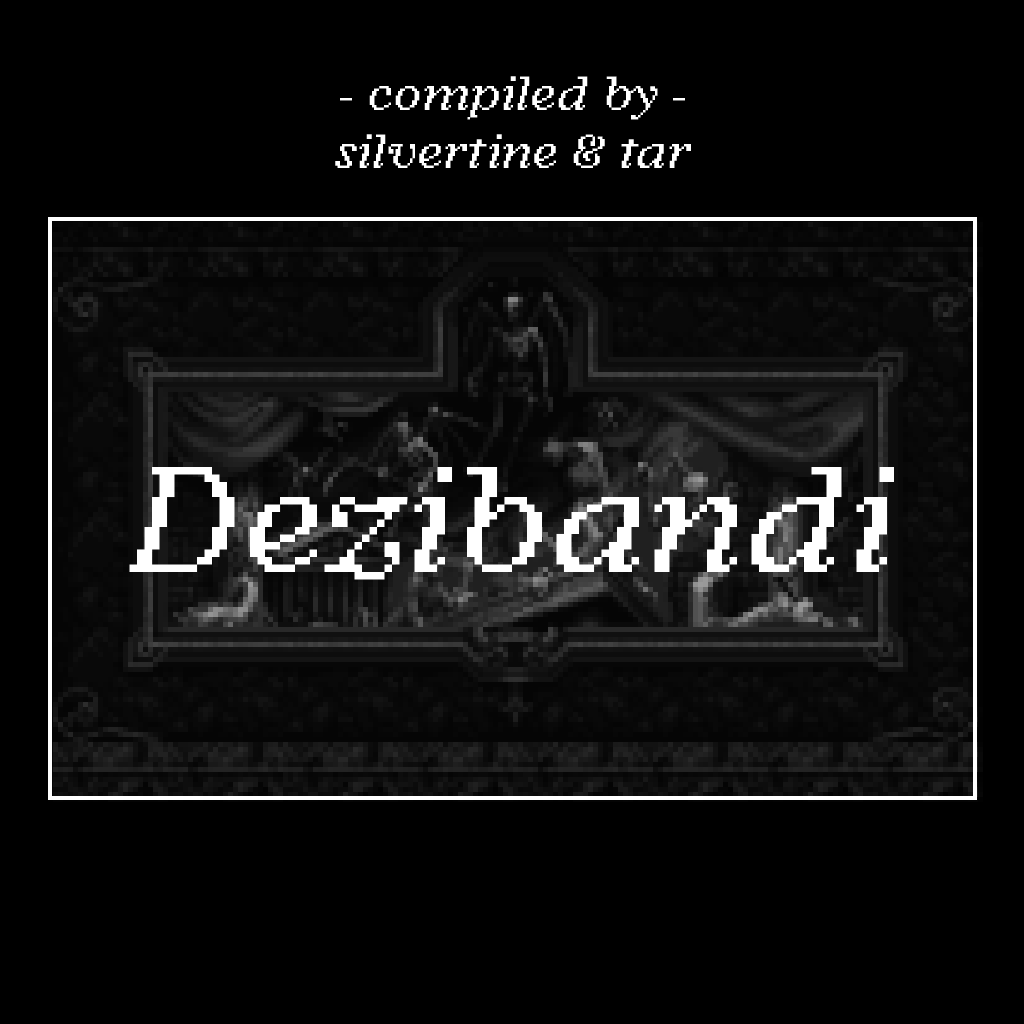
<style>
.page{position:relative;width:1024px;height:1024px;background:#000000}
.page>*{position:absolute;margin:0}
.t1{font:48px "ArgentPixelCF-Italic";color:#ffffff}
.t2{font:150px "ArgentPixelCF-Italic";color:#ffffff}
</style>
<div class="page">
<p class="t1" style="left:335px;top:76px;width:356px;height:92px;text-align:center">- compiled by -<br>silvertine &amp; tar</p>
<p class="t2" style="left:129px;top:467px;width:765px;height:113px">Dezibandi</p>
</div>
